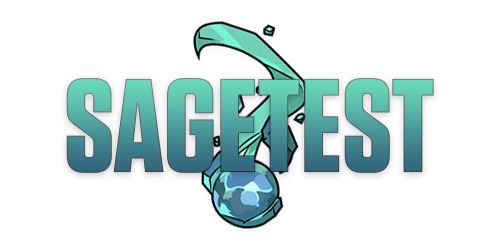
<style>
.page{position:relative;width:500px;height:250px;background:#ffffff}
.page>*{position:absolute;margin:0}
.t1{font:133px "Tungsten-Bold"}
</style>
<div class="page">
<p class="t1" style="left:66px;top:78px;width:368px;height:95px">SAGETEST</p>
</div>
